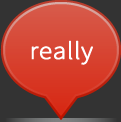
<style>
.page{position:relative;width:121px;height:122px;background:#333333}
.page>*{position:absolute;margin:0}
.t1{font:24.5px "SourceSansPro-Light";color:#ffffff;font-weight:bold;scale:1.1 1}
</style>
<div class="page">
<p class="t1" style="left:31px;top:40px;width:62px;height:25px">really</p>
</div>
